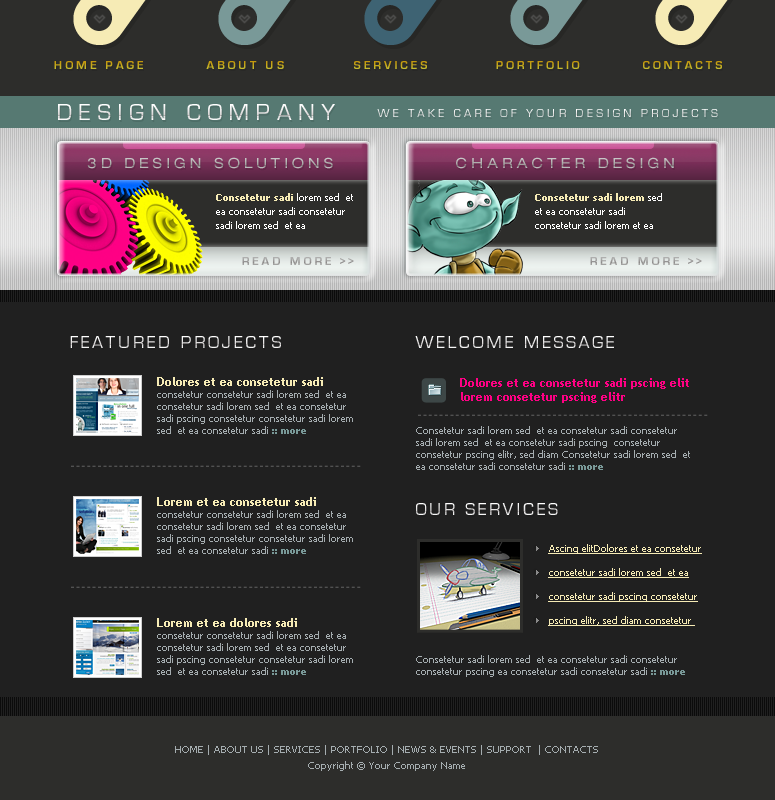
<style>
.page{position:relative;width:775px;height:800px;background:#202020}
.page>*{position:absolute;margin:0}
.t1{font:12px "EurostileBold";letter-spacing:0.28em;color:#c5a518}
.t2{font:12px "EurostileBold";letter-spacing:0.28em;color:#c5aa1e}
.t3{font:12px "EurostileBold";letter-spacing:0.28em;color:#c5a215}
.t4{font:24px "EurostileRegular";letter-spacing:0.28em;color:#ffffff}
.t5{font:12px "EurostileRegular";letter-spacing:0.28em;color:#ffffff}
.t6{font:14px "HelveticaNeueLTPro-Ex";letter-spacing:0.28em;color:#bbbbbb}
.t7{font:14px "HelveticaNeueLTPro-Ex";letter-spacing:0.28em}
.t8{font:10px/14px "Tahoma";color:#ffffff}
.t9{font:10px/14px "Tahoma-Bold";color:#f6ebb5}
.t10{font:12px "EurostileBold";letter-spacing:0.28em;color:#a3a3a2}
.t11{font:18px "EurostileRegular";letter-spacing:0.16em;color:#ffffff}
.t12{font:10px/12px "Tahoma";color:#a5adb0}
.t13{font:12px/12px "TrebuchetMS-Bold";color:#f6ebb5}
.t14{font:10px/12px "Tahoma-Bold";color:#799998}
.t15{font:12px/14px "TrebuchetMS-Bold";color:#ff0084}
.t16{font:15px "EurostileRegular";letter-spacing:0.16em}
.t17{font:10px/24px "Tahoma";color:#f6ebb5;text-decoration:underline}
.t18{font:10px/16px "Tahoma";color:#a5adb0}
</style>
<div class="page">
<p class="t1" style="left:54px;top:61px;width:89px;height:8px">HOME PAGE</p>
<p class="t1" style="left:206px;top:61px;width:78px;height:8px">ABOUT US</p>
<p class="t2" style="left:354px;top:61px;width:73px;height:8px">SERVICES</p>
<p class="t1" style="left:496px;top:61px;width:84px;height:8px">PORTFOLIO</p>
<p class="t3" style="left:643px;top:61px;width:79px;height:8px">CONTACTS</p>
<p class="t4" style="left:58px;top:104px;width:277px;height:16px">DESIGN COMPANY</p>
<p class="t5" style="left:377px;top:109px;width:341px;height:8px">WE TAKE CARE OF YOUR DESIGN PROJECTS</p>
<p class="t6" style="left:87px;top:157px;width:246px;height:12px">3D DESIGN SOLUTIONS</p>
<p class="t7" style="left:456px;top:157px;width:218px;height:12px">CHARACTER DESIGN</p>
<p class="t8" style="left:216px;top:193px;width:137px;height:36px"><span class="t9">Consetetur sadi</span> lorem sed  et ea consetetur sadi consetetur sadi lorem sed  et ea</p>
<p class="t8" style="left:535px;top:193px;width:127px;height:36px"><span class="t9">Consetetur sadi lorem</span> sed  et ea consetetur sadi consetetur sadi lorem et ea</p>
<p class="t10" style="left:242px;top:257px;width:112px;height:8px">READ MORE &gt;&gt;</p>
<p class="t10" style="left:590px;top:257px;width:112px;height:8px">READ MORE &gt;&gt;</p>
<p class="t11" style="left:70px;top:336px;width:211px;height:12px">FEATURED PROJECTS</p>
<p class="t11" style="left:415px;top:336px;width:199px;height:12px">WELCOME MESSAGE</p>
<p class="t12" style="left:157px;top:377px;width:196px;height:57px"><span class="t13">Dolores et ea consetetur sadi <br></span>consetetur consetetur sadi lorem sed  et ea consetetur sadi lorem sed  et ea consetetur sadi pscing consetetur consetetur sadi lorem sed  et ea consetetur sadi <span class="t14">:: more</span></p>
<p class="t15" style="left:460px;top:378px;width:229px;height:25px">Dolores et ea consetetur sadi pscing elit lorem consetetur pscing elitr</p>
<p class="t16" style="left:418px;top:414px;width:290px;height:2px">------------------------------------------------------</p>
<p class="t12" style="left:416px;top:426px;width:274px;height:44px">Consetetur sadi lorem sed  et ea consetetur sadi consetetur sadi lorem sed  et ea consetetur sadi pscing  consetetur consetetur pscing elitr, sed diam Consetetur sadi lorem sed  et ea consetetur sadi consetetur sadi <span class="t14">:: more</span></p>
<p class="t16" style="left:71px;top:465px;width:290px;height:2px">------------------------------------------------------</p>
<p class="t12" style="left:157px;top:497px;width:196px;height:57px"><span class="t13">Lorem et ea consetetur sadi <br></span>consetetur consetetur sadi lorem sed  et ea consetetur sadi lorem sed  et ea consetetur sadi pscing consetetur consetetur sadi lorem sed  et ea consetetur sadi <span class="t14">:: more</span></p>
<p class="t11" style="left:416px;top:503px;width:142px;height:12px">OUR SERVICES</p>
<p class="t17" style="left:548px;top:544px;width:154px;height:82px">Ascing elitDolores et ea consetetur consetetur sadi lorem sed  et ea consetetur sadi pscing consetetur pscing elitr, sed diam consetetur</p>
<p class="t16" style="left:71px;top:586px;width:290px;height:2px">------------------------------------------------------</p>
<p class="t12" style="left:157px;top:618px;width:196px;height:57px"><span class="t13">Lorem et ea dolores sadi <br></span>consetetur consetetur sadi lorem sed  et ea consetetur sadi lorem sed  et ea consetetur sadi pscing consetetur consetetur sadi lorem sed  et ea consetetur sadi <span class="t14">:: more</span></p>
<p class="t12" style="left:416px;top:655px;width:269px;height:22px">Consetetur sadi lorem sed  et ea consetetur sadi consetetur consetetur pscing ea consetetur sadi consetetur sadi <span class="t14">:: more</span></p>
<p class="t18" style="left:175px;top:745px;width:423px;height:26px;text-align:center">HOME | ABOUT US | SERVICES | PORTFOLIO | NEWS &amp; EVENTS | SUPPORT  | CONTACTS<br>Copyright © Your Company Name</p>
</div>
